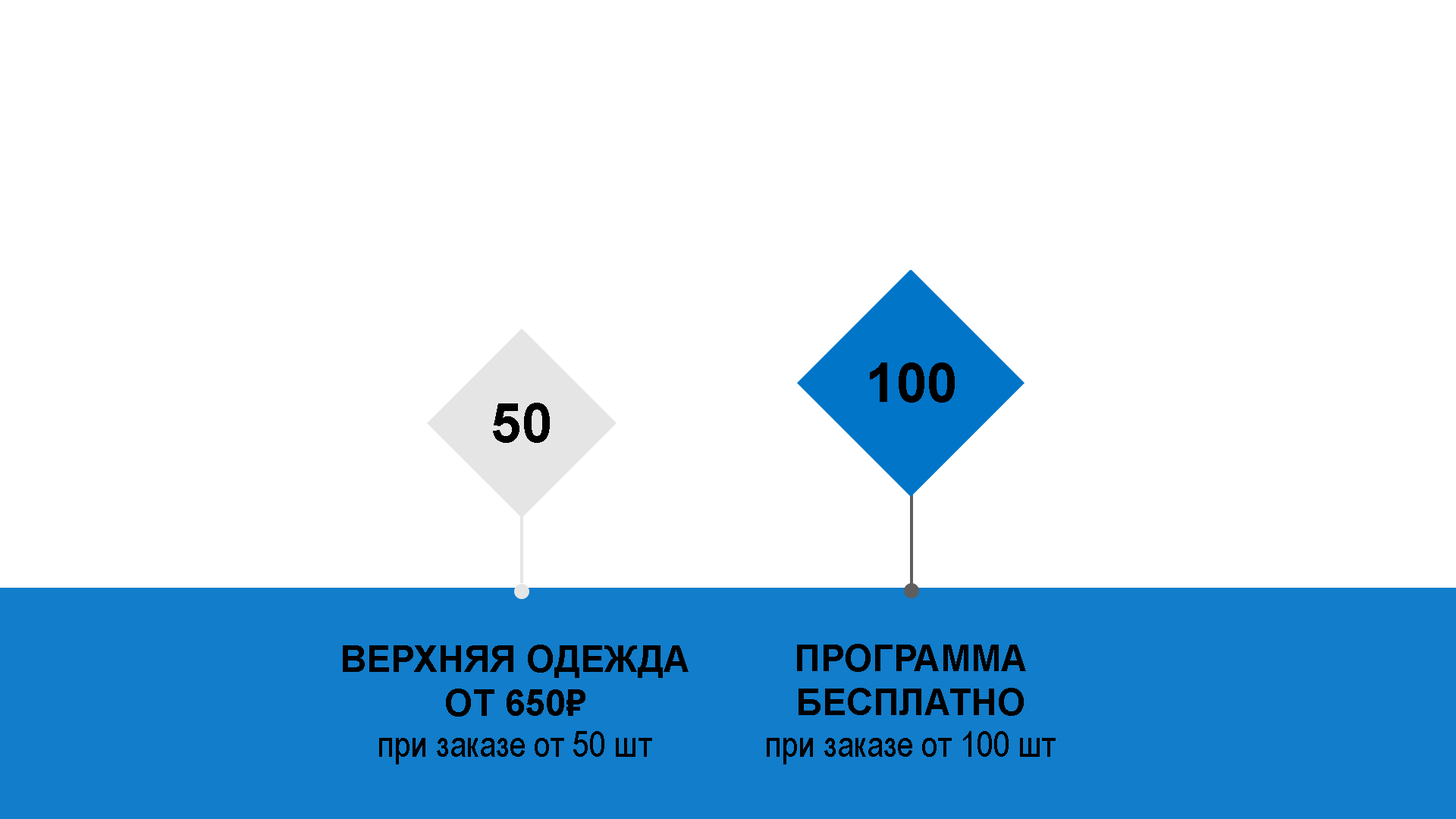
<style>
.page{position:relative;width:1456px;height:819px;background:#ffffff}
.page>*{position:absolute;margin:0}
.t1{font:54.6px "Arial-BoldMT";color:#000000}
.t2{font:36.4px "Arial-BoldMT";color:#000000}
.t3{font:36.4px "ArialNarrow";color:#000000}
</style>
<div class="page">
<p class="t1" style="left:870px;top:362px;width:85px;height:41px">100</p>
<p class="t1" style="left:493px;top:403px;width:57px;height:40px">50</p>
<p class="t2" style="left:343px;top:645px;width:346px;height:72px;text-align:center">ВЕРХНЯЯ ОДЕЖДА<br>ОТ 650₽</p>
<p class="t2" style="left:797px;top:644px;width:229px;height:72px;text-align:center">ПРОГРАММА<br>БЕСПЛАТНО</p>
<p class="t3" style="left:379px;top:731px;width:273px;height:33px">при заказе от 50 шт</p>
<p class="t3" style="left:767px;top:731px;width:289px;height:33px">при заказе от 100 шт</p>
</div>
